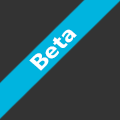
<style>
.page{position:relative;width:120px;height:120px;background:#333333}
.page>*{position:absolute;margin:0}
.t1{font:20.1px "MicrosoftYaHei-Bold";color:#ffffff;scale:1.19 1}
</style>
<div class="page">
<p class="t1" style="left:29px;top:29px;width:48px;height:42px;rotate:-45deg">Beta</p>
</div>
